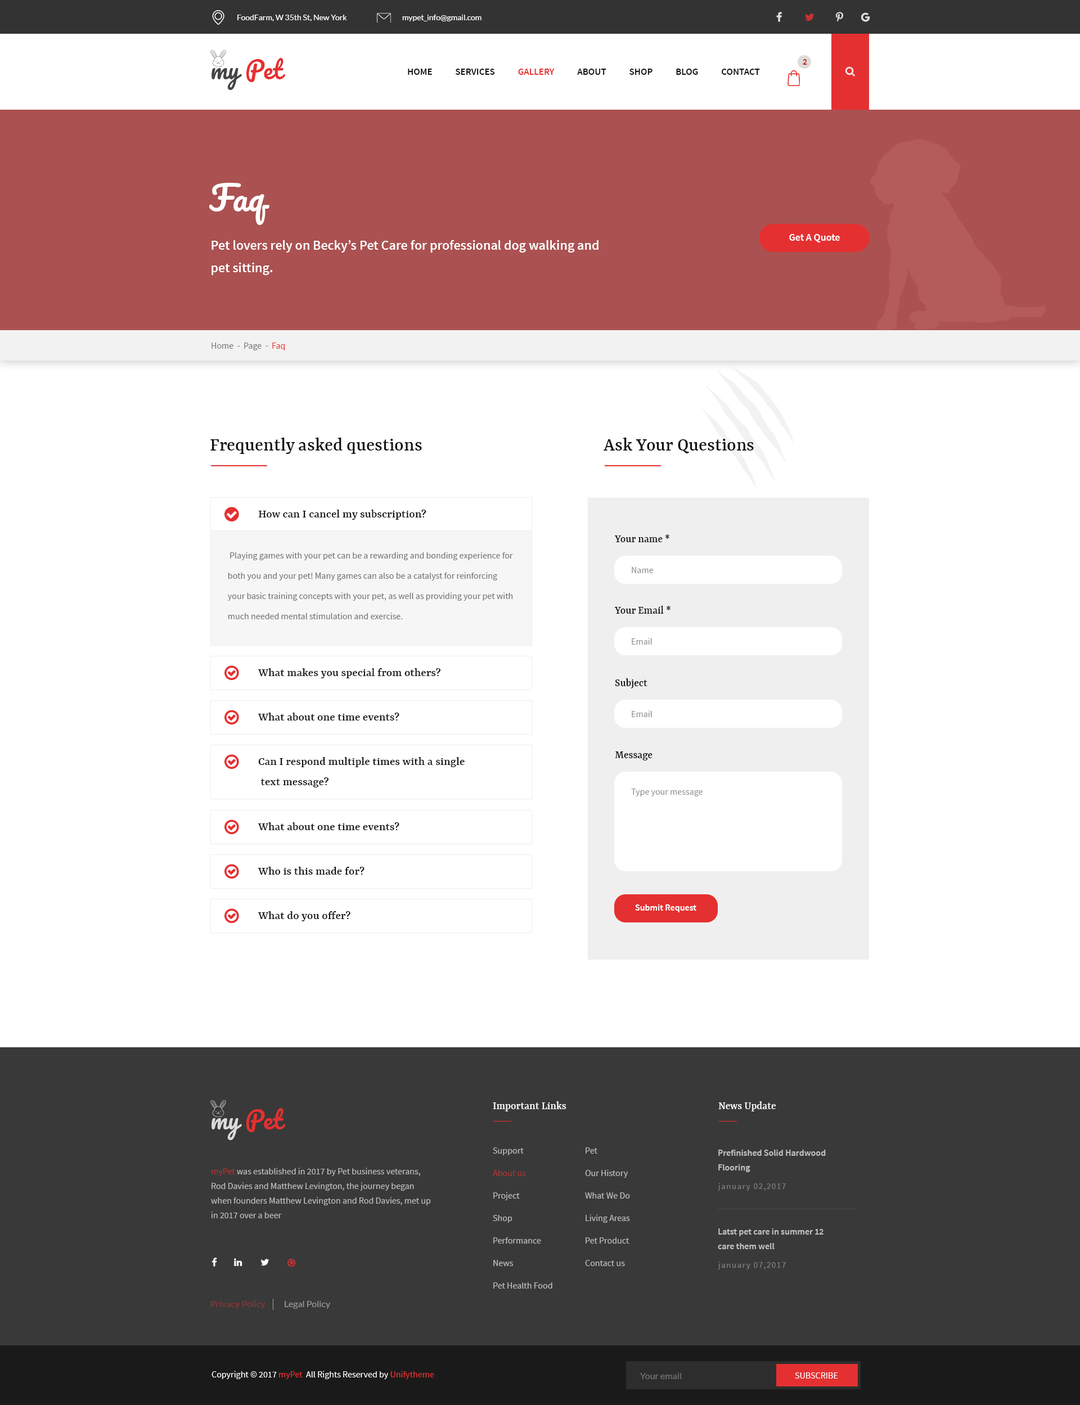
<style>
.page{position:relative;width:1080px;height:1405px;background:#ffffff}
.page>*{position:absolute;margin:0}
.t1{font:7.9px "Lato-Regular";color:#ffffff}
.t2{font:23.6px "Pacifico-Regular";color:#e53031}
.t3{font:23.6px "Pacifico-Regular";color:#454444}
.t4{font:9px "SourceSansPro-SemiBold";color:#d12526;text-transform:uppercase}
.t5{font:9.6px "SourceSansPro-SemiBold";color:#121212;text-transform:uppercase}
.t6{font:9.6px "SourceSansPro-SemiBold";color:#e53031;text-transform:uppercase}
.t7{font:33.8px "Pacifico-Regular";color:#ffffff}
.t8{font:13.5px/22.5px "SourceSansPro-SemiBold";color:#ffffff}
.t9{font:10.1px "SourceSansPro-SemiBold";color:#fffefe}
.t10{font:9px "SourceSansPro-Regular";color:#767575}
.t11{font:9px "SourceSansPro-Regular";color:#e53031}
.t12{font:19.7px "Yrsa-Medium";color:#121212}
.t13{font:12.4px "Yrsa-Medium";color:#121212}
.t14{font:11.2px "Yrsa-Medium";color:#121212}
.t15{font:9px/20.2px "SourceSansPro-Regular";color:#6f6f6f}
.t16{font:9px "SourceSansPro-Regular";color:#8d8d8d}
.t17{font:12.4px/20.2px "Yrsa-Medium";color:#121212}
.t18{font:9px "SourceSansPro-SemiBold";color:#ffffff}
.t19{font:23.6px "Pacifico-Regular";color:#dcdada}
.t20{font:11.2px "Yrsa-Medium";color:#ffffff}
.t21{font:9px/22.5px "SourceSansPro-Regular";color:#c0c0c0}
.t22{font:9px/14.6px "SourceSansPro-SemiBold";color:#c0c0c0}
.t23{font:9px/14.6px "SourceSansPro-Regular";color:#c0c0c0}
.t24{font:8.4px "SourceSansPro-Regular";letter-spacing:0.1em;color:#7d7d7d}
.t25{font:9px "Lato-Regular";color:#8e3536}
.t26{font:9px "Lato-Regular";color:#9c9b9b}
.t27{font:9px "SourceSansPro-Regular";color:#fefefe}
.t28{font:9px "Lato-Regular";color:#777777}
.t29{font:9px "SourceSansPro-Regular";color:#ffffff;text-transform:uppercase}
</style>
<div class="page">
<p class="t1" style="left:237px;top:15px;width:110px;height:6px">FoodFarm, W 35th St, New York</p>
<p class="t1" style="left:402px;top:15px;width:80px;height:6px">mypet_info@gmail.com</p>
<p class="t2" style="left:212px;top:58px;width:73px;height:32px"><span class="t3">my </span>Pet</p>
<p class="t4" style="left:803px;top:59px;width:4px;height:6px">2</p>
<p class="t5" style="left:408px;top:69px;width:352px;height:6px">Home            Services            <span class="t6">Gallery            </span>About            Shop            Blog            Contact</p>
<p class="t7" style="left:209px;top:183px;width:60px;height:42px">Faq</p>
<p class="t8" style="left:212px;top:240px;width:386px;height:35px">Pet lovers rely on Becky’s Pet Care for professional dog walking and pet sitting.</p>
<p class="t9" style="left:789px;top:234px;width:51px;height:8px">Get A Quote</p>
<p class="t10" style="left:212px;top:343px;width:73px;height:7px">Home  -  Page  - <span class="t11"> Faq</span></p>
<p class="t12" style="left:210px;top:438px;width:212px;height:16px">Frequently asked questions</p>
<p class="t12" style="left:603px;top:438px;width:151px;height:15px">Ask Your Questions</p>
<p class="t13" style="left:258px;top:510px;width:168px;height:10px">How can I cancel my subscription?</p>
<p class="t14" style="left:614px;top:534px;width:55px;height:8px">Your name *</p>
<p class="t15" style="left:227px;top:552px;width:286px;height:67px">Playing games with your pet can be a rewarding and bonding experience for both you and your pet! Many games can also be a catalyst for reinforcing your basic training concepts with your pet, as well as providing your pet with much needed mental stimulation and exercise.</p>
<p class="t16" style="left:632px;top:567px;width:22px;height:6px">Name</p>
<p class="t14" style="left:614px;top:606px;width:56px;height:8px">Your Email *</p>
<p class="t16" style="left:632px;top:638px;width:20px;height:7px">Email</p>
<p class="t13" style="left:258px;top:668px;width:183px;height:10px">What makes you special from others?</p>
<p class="t14" style="left:615px;top:678px;width:32px;height:10px">Subject</p>
<p class="t13" style="left:258px;top:713px;width:141px;height:8px">What about one time events?</p>
<p class="t16" style="left:632px;top:710px;width:20px;height:7px">Email</p>
<p class="t17" style="left:258px;top:757px;width:207px;height:31px">Can I respond multiple times with a single<br> text message?</p>
<p class="t14" style="left:615px;top:752px;width:37px;height:8px">Message</p>
<p class="t16" style="left:631px;top:789px;width:72px;height:7px">Type your message</p>
<p class="t13" style="left:258px;top:822px;width:141px;height:8px">What about one time events?</p>
<p class="t13" style="left:258px;top:867px;width:106px;height:8px">Who is this made for?</p>
<p class="t18" style="left:635px;top:904px;width:61px;height:8px">Submit Request</p>
<p class="t13" style="left:258px;top:911px;width:92px;height:10px">What do you offer?</p>
<p class="t2" style="left:212px;top:1108px;width:73px;height:32px"><span class="t19">my </span>Pet</p>
<p class="t20" style="left:493px;top:1101px;width:73px;height:11px">Important Links</p>
<p class="t20" style="left:718px;top:1101px;width:58px;height:11px">News Update</p>
<p class="t21" style="left:493px;top:1148px;width:59px;height:141px">Support<br>About us <br>Project<br>Shop<br>Performance<br>News<br>Pet Health Food</p>
<p class="t21" style="left:585px;top:1148px;width:45px;height:118px">Pet<br>Our History<br>What We Do<br>Living Areas<br>Pet Product<br>Contact us</p>
<p class="t22" style="left:718px;top:1150px;width:108px;height:22px">Prefinished Solid Hardwood <br>Flooring</p>
<p class="t23" style="left:211px;top:1168px;width:220px;height:50px">myPet was established in 2017 by Pet business veterans, Rod Davies and Matthew Levington, the journey began when founders Matthew Levington and Rod Davies, met up in 2017 over a beer</p>
<p class="t24" style="left:718px;top:1183px;width:68px;height:8px">january 02,2017</p>
<p class="t22" style="left:718px;top:1228px;width:106px;height:21px">Latst pet care in summer 12<br>care them well</p>
<p class="t24" style="left:718px;top:1262px;width:68px;height:8px">january 07,2017</p>
<p class="t25" style="left:211px;top:1301px;width:55px;height:8px">Privacy Policy</p>
<p class="t26" style="left:285px;top:1301px;width:45px;height:8px">Legal Policy</p>
<p class="t27" style="left:212px;top:1371px;width:222px;height:8px">Copyright © 2017 <span class="t11">myPet </span> All Rights Reserved by <span class="t11">Unifytheme</span></p>
<p class="t28" style="left:640px;top:1373px;width:41px;height:6px">Your email</p>
<p class="t29" style="left:795px;top:1372px;width:43px;height:7px">Subscribe</p>
</div>
